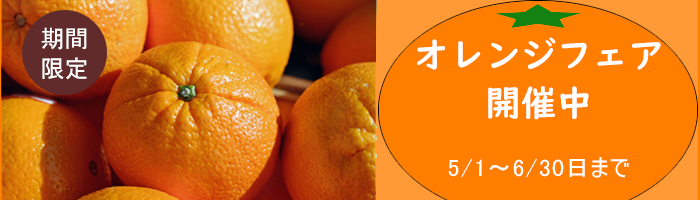
<style>
.page{position:relative;width:700px;height:200px;background:#ff7e00}
.page>*{position:absolute;margin:0}
.t1{font:24px/30px "MS-UIGothic";letter-spacing:-0.005em;color:#ffffff}
.t2{font:24px/30px "MS-UIGothic";letter-spacing:0.1em;color:#ffffff}
.t3{font:24px/30px "MS-UIGothic";letter-spacing:0.05em;color:#ffffff}
.t4{font:36px/30px "UDDigiKyokashoN-B";letter-spacing:-0.005em;color:#ffffff}
.t5{font:36px/48px "UDDigiKyokashoN-B";letter-spacing:-0.005em;color:#ffffff}
</style>
<div class="page">
<p class="t1" style="left:41px;top:27px;width:46px;height:53px"><span class="t2"> </span>期間<br> 限定</p>
<p class="t3" style="left:417px;top:37px;width:244px;height:141px"><span class="t4">オレンジフェア<br>　　</span><span class="t5">開催中<br><br></span>　　5/1～6/30日まで</p>
</div>
